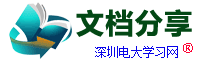
<style>
.page{position:relative;width:200px;height:60px;background:#ffffff}
.page>*{position:absolute;margin:0}
.t1{font:28px "MicrosoftYaHei-Bold";letter-spacing:0.05em;color:#034815}
.t2{font:12px "SimSun";color:#0803ea}
.t3{font:20px "SimSun";color:#ff0033}
</style>
<div class="page">
<p class="t1" style="left:76px;top:9px;width:116px;height:28px">文档分享</p>
<p class="t2" style="left:95px;top:43px;width:98px;height:15px">深圳电大学习网 <span class="t3">®</span></p>
</div>
